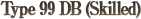
<style>
.page{position:relative;width:141px;height:19px;background:#ffffff}
.page>*{position:absolute;margin:0}
.t1{font:18px "RyuminPro-ExBold";letter-spacing:-0.08em;color:#4a3f32;font-weight:bold;scale:0.9 1}
</style>
<div class="page">
<p class="t1" style="left:0px;top:1px;width:141px;height:18px">Type 99 DB (Skilled)</p>
</div>
